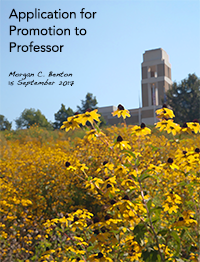
<style>
.page{position:relative;width:200px;height:262px}
.page>*{position:absolute;margin:0}
.t1{font:13.4px/16.7px "Avenir-Roman";letter-spacing:-0.01em;color:#000000}
.t2{font:7.4px/8.3px "Handwriting-Dakota";letter-spacing:0.01em;color:#000000}
</style>
<div class="page">
<p class="t1" style="left:8px;top:8px;width:89px;height:44px">Application for<br>Promotion to<br>Professor</p>
<p class="t2" style="left:8px;top:71px;width:66px;height:16px">Morgan C. Benton<br>15 September 2017</p>
</div>
